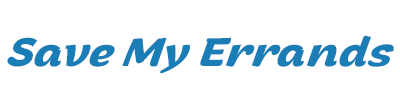
<style>
.page{position:relative;width:400px;height:100px;background:#ffffff}
.page>*{position:absolute;margin:0}
.t1{font:40px "ArturoTrial-BoldItalic";color:#1a7db6;font-style:italic}
</style>
<div class="page">
<p class="t1" style="left:7px;top:35px;width:387px;height:39px">Save My Errands</p>
</div>
